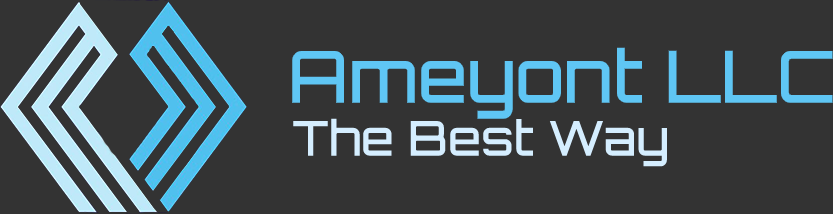
<style>
.page{position:relative;width:833px;height:214px;background:#333333}
.page>*{position:absolute;margin:0}
.t1{font:72px "Orbitron-Medium";color:#5fc6f4}
.t2{font:48px "Orbitron-Medium";color:#d5eeff}
</style>
<div class="page">
<p class="t1" style="left:292px;top:47px;width:541px;height:72px">Ameyont LLC</p>
<p class="t2" style="left:293px;top:118px;width:374px;height:49px">The Best Way</p>
</div>
